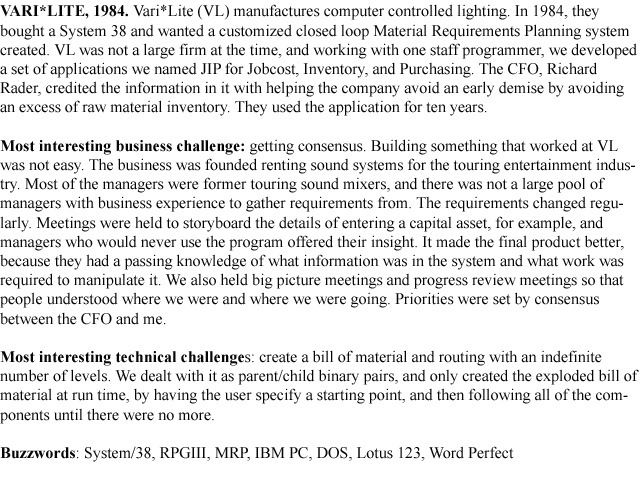
<style>
.page{position:relative;width:640px;height:480px;background:#ffffff}
.page>*{position:absolute;margin:0}
.t1{font:16px "TimesNewRomanPSMT";color:#050505}
.t2{font:16px "TimesNewRomanPS-BoldMT";color:#050505}
</style>
<div class="page">
<p class="t1" style="left:0px;top:4px;width:639px;height:458px"><span class="t2">VARI*LITE, 1984.</span> Vari*Lite (VL) manufactures computer controlled lighting. In 1984, they bought a System 38 and wanted a customized closed loop Material Requirements Planning system created. VL was not a large firm at the time, and working with one staff programmer, we developed a set of applications we named JIP for Jobcost, Inventory, and Purchasing. The CFO, Richard Rader, credited the information in it with helping the company avoid an early demise by avoiding an excess of raw material inventory. They used the application for ten years.<br><br><span class="t2">Most interesting business challenge:</span> getting consensus. Building something that worked at VL was not easy. The business was founded renting sound systems for the touring entertainment industry. Most of the managers were former touring sound mixers, and there was not a large pool of managers with business experience to gather requirements from. The requirements changed regularly. Meetings were held to storyboard the details of entering a capital asset, for example, and managers who would never use the program offered their insight. It made the final product better, because they had a passing knowledge of what information was in the system and what work was required to manipulate it. We also held big picture meetings and progress review meetings so that people understood where we were and where we were going. Priorities were set by consensus between the CFO and me.<br><br><span class="t2">Most interesting technical challenge</span>s: create a bill of material and routing with an indefinite number of levels. We dealt with it as parent/child binary pairs, and only created the exploded bill of material at run time, by having the user specify a starting point, and then following all of the components until there were no more.<br><br><span class="t2">Buzzwords</span>: System/38, RPGIII, MRP, IBM PC, DOS, Lotus 123, Word Perfect</p>
</div>
